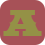
<style>
.page{position:relative;width:45px;height:45px;background:#a75157}
.page>*{position:absolute;margin:0}
.t1{font:50px "Saddlebag-Black";color:#949146}
</style>
<div class="page">
<p class="t1" style="left:3px;top:10px;width:39px;height:26px">A</p>
</div>
